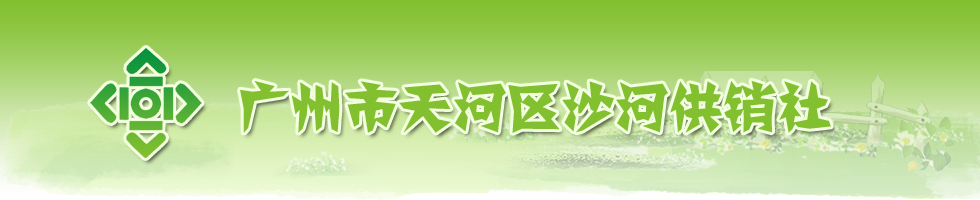
<style>
.page{position:relative;width:980px;height:200px}
.page>*{position:absolute;margin:0}
.t1{font:54.2px "FZJZJW--GB1-0";color:#82c02f}
</style>
<div class="page">
<p class="t1" style="left:240px;top:80px;width:591px;height:53px">广州市天河区沙河供销社</p>
</div>
